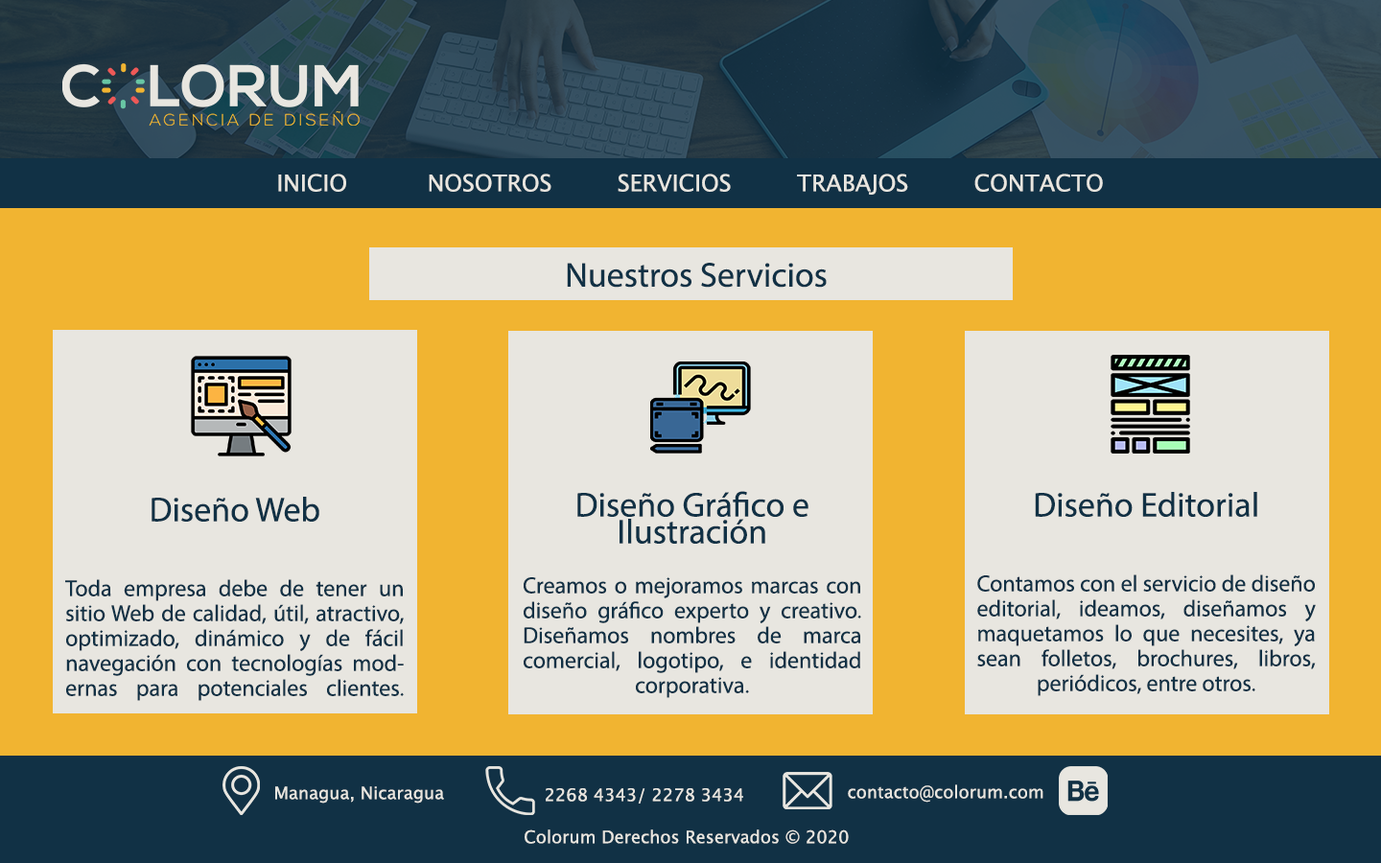
<style>
.page{position:relative;width:1381px;height:863px;background:#e8e6e0}
.page>*{position:absolute;margin:0}
.t1{font:23px "LucidaGrande";color:#e8e6e0}
.t2{font:34.5px "MyriadPro-Regular";color:#113145}
.t3{font:23px/24.9px "MyriadPro-Regular";color:#113145}
.t4{font:34.5px/24.9px "MyriadPro-Regular";color:#113145}
.t5{font:34.5px/26.9px "MyriadPro-Regular";color:#113145}
.t6{font:23px/24.9px "MyriadPro-Regular";color:#113145;text-transform:uppercase}
.t7{font:17.3px "LucidaGrande";color:#e8e6e0}
</style>
<div class="page">
<p class="t1" style="left:278px;top:174px;width:825px;height:21px">INICIO           NOSOTROS         SERVICIOS         TRABAJOS         CONTACTO</p>
<p class="t2" style="left:567px;top:263px;width:260px;height:25px">Nuestros Servicios</p>
<p class="t3" style="left:65px;top:497px;width:339px;height:204px;text-align:center"><span class="t4">Diseño Web <br></span><br><br>Toda empresa debe de tener un sitio Web de calidad, útil, atractivo, optimizado, dinámico y de fácil navegación con tecnologías modernas para potenciales clientes.</p>
<p class="t3" style="left:524px;top:491px;width:337px;height:207px;text-align:center"><span class="t5">Diseño Gráfico e <br>Ilustración <br><br></span><span class="t6">C</span>reamos o mejoramos marcas con diseño gráfico experto y creativo. Diseñamos nombres de marca comercial, logotipo, e identidad corporativa.</p>
<p class="t3" style="left:977px;top:492px;width:339px;height:204px;text-align:center"><span class="t4">Diseño Editorial<br><br><br></span>Contamos con el servicio de diseño editorial, ideamos, diseñamos y <br>maquetamos lo que necesites, ya sean folletos, brochures, libros, periódicos, entre otros.</p>
<p class="t7" style="left:848px;top:785px;width:196px;height:18px">contacto@colorum.com</p>
<p class="t7" style="left:275px;top:787px;width:169px;height:17px">Managua, Nicaragua</p>
<p class="t7" style="left:546px;top:788px;width:197px;height:16px">2268 4343/ 2278 3434</p>
<p class="t7" style="left:525px;top:830px;width:324px;height:14px">Colorum Derechos Reservados © 2020</p>
</div>
